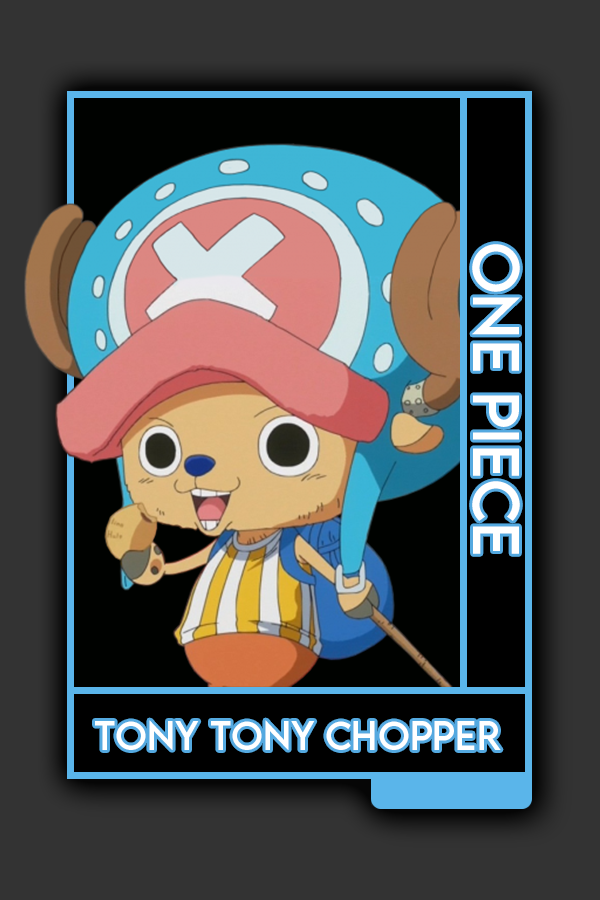
<style>
.page{position:relative;width:600px;height:900px;background:#333333}
.page>*{position:absolute;margin:0}
.t1{font:58.4px "LEMONMILK-Regular";color:#ffffff}
.t2{font:35.7px "LEMONMILK-Regular";color:#ffffff}
</style>
<div class="page">
<p class="t1" style="left:472px;top:244px;width:48px;height:310px;rotate:90deg">One Piece</p>
<p class="t2" style="left:95px;top:720px;width:406px;height:30px">Tony Tony Chopper</p>
</div>
